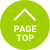
<style>
.page{position:relative;width:50px;height:50px;background:#a1cf00}
.page>*{position:absolute;margin:0}
.t1{font:9px/9px "Roboto-Bold";color:#ffffff}
</style>
<div class="page">
<p class="t1" style="left:14px;top:25px;width:23px;height:16px;text-align:center">PAGE<br>TOP</p>
</div>
